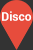
<style>
.page{position:relative;width:33px;height:50px;background:#e74c3c}
.page>*{position:absolute;margin:0}
.t1{font:12px "Roboto-Bold";color:#ffffff}
</style>
<div class="page">
<p class="t1" style="left:2px;top:11px;width:30px;height:10px">Disco</p>
</div>
